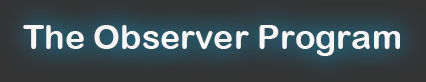
<style>
.page{position:relative;width:426px;height:82px}
.page>*{position:absolute;margin:0}
.t1{font:34px "ArialRoundedMTBold";color:#f8f5f5}
</style>
<div class="page">
<p class="t1" style="left:23px;top:25px;width:377px;height:31px">The Observer Program</p>
</div>
